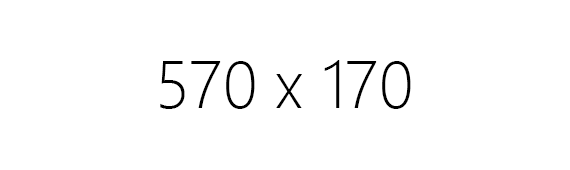
<style>
.page{position:relative;width:570px;height:170px;background:#ffffff}
.page>*{position:absolute;margin:0}
.t1{font:66.7px "SegoeUI-Light";color:#000000}
</style>
<div class="page">
<p class="t1" style="left:160px;top:60px;width:251px;height:49px">570 x 170</p>
</div>
